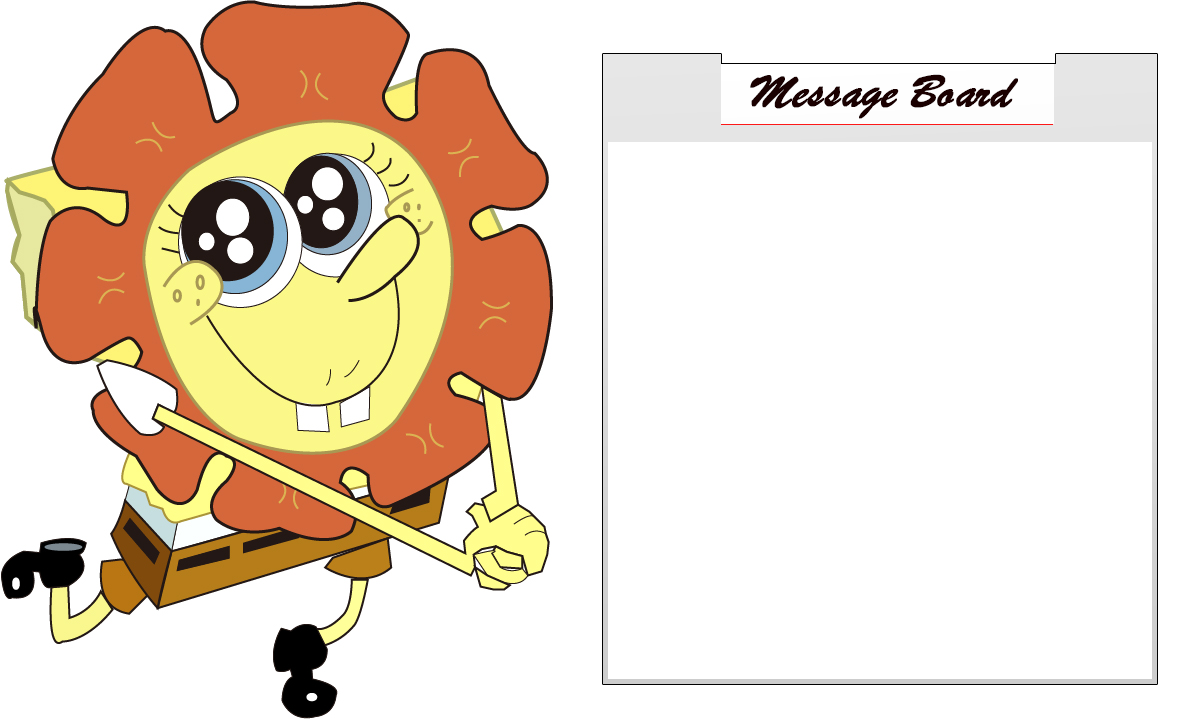
<style>
.page{position:relative;width:1200px;height:719px;background:#ffffff}
.page>*{position:absolute;margin:0}
.t1{font:48px "STXingkai";color:#1a0000;font-weight:bold;font-style:italic}
</style>
<div class="page">
<p class="t1" style="left:750px;top:74px;width:268px;height:45px">Message Board</p>
</div>
